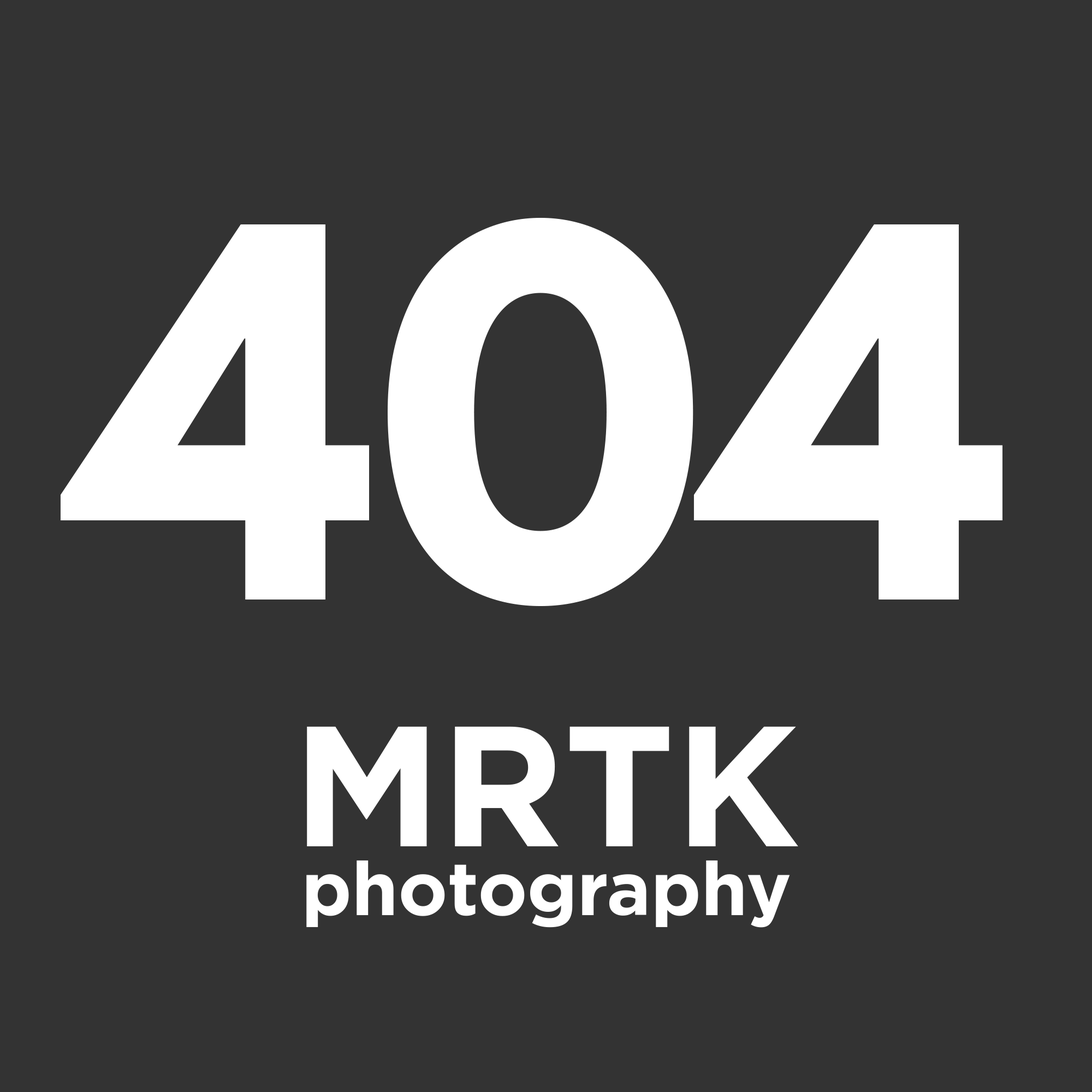
<style>
.page{position:relative;width:1092px;height:1092px;background:#333333}
.page>*{position:absolute;margin:0}
.t1{font:455px "LeagueSpartan-Bold";color:#ffffff}
.t2{font:170.8px "GothamPro-Bold";color:#ffffff}
.t3{font:74.6px "GothamPro-Bold";color:#ffffff}
</style>
<div class="page">
<p class="t1" style="left:60px;top:218px;width:942px;height:388px">404</p>
<p class="t2" style="left:307px;top:726px;width:491px;height:120px">MRTK</p>
<p class="t3" style="left:306px;top:860px;width:484px;height:68px">photography</p>
</div>
